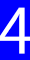
<style>
.page{position:relative;width:30px;height:60px;background:#0000ff}
.page>*{position:absolute;margin:0}
.t1{font:60.7px "KozGoPr6N-Regular";color:#ffffff}
</style>
<div class="page">
<p class="t1" style="left:0px;top:7px;width:31px;height:47px">4</p>
</div>
